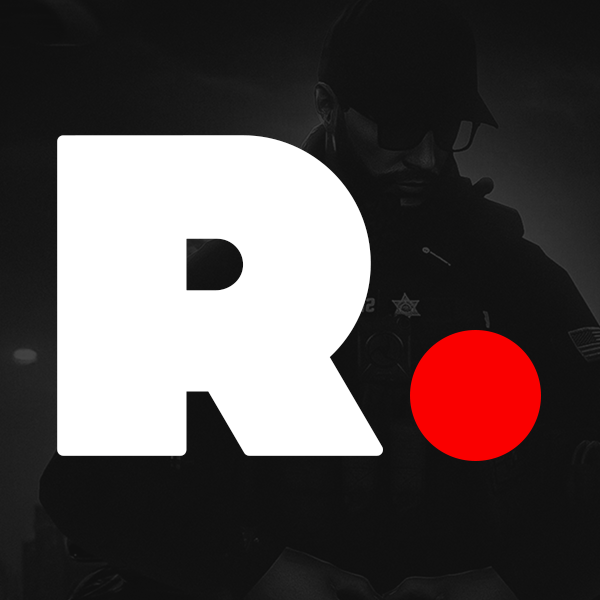
<style>
.page{position:relative;width:600px;height:600px;background:#ffffff}
.page>*{position:absolute;margin:0}
.t1{font:449.8px "AironeDemo";letter-spacing:0.05em;color:#ffffff;text-transform:uppercase;font-weight:bold}
</style>
<div class="page">
<p class="t1" style="left:57px;top:135px;width:326px;height:321px">R</p>
</div>
